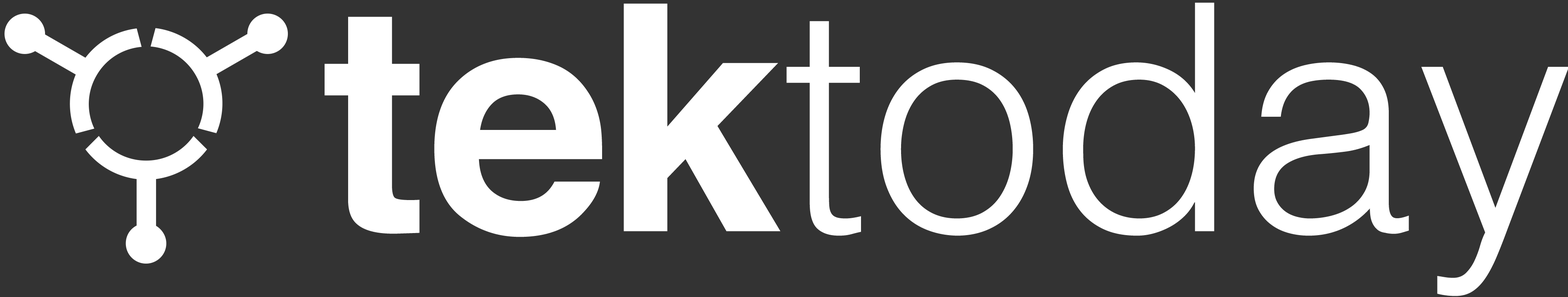
<style>
.page{position:relative;width:1568px;height:297px;background:#333333}
.page>*{position:absolute;margin:0}
.t1{font:317.6px "Helvetica-Light";color:#ffffff}
.t2{font:317.6px "Helvetica-Bold";color:#ffffff}
</style>
<div class="page">
<p class="t1" style="left:325px;top:2px;width:1244px;height:295px"><span class="t2">tek</span>today</p>
</div>
